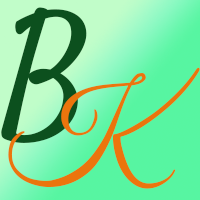
<style>
.page{position:relative;width:200px;height:200px}
.page>*{position:absolute;margin:0}
.t1{font:145.2px "Satisfy-Regular";letter-spacing:-0.04em;color:#0c501e}
.t2{font:116.6px "GreatVibes-Regular";letter-spacing:-0.04em;color:#eb750d}
</style>
<div class="page">
<p class="t1" style="left:1px;top:7px;width:86px;height:136px">B</p>
<p class="t2" style="left:8px;top:67px;width:192px;height:122px">K</p>
</div>
